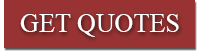
<style>
.page{position:relative;width:200px;height:52px;background:#993333}
.page>*{position:absolute;margin:0}
.t1{font:26.7px "TimesNewRomanPSMT";color:#ffffff;text-transform:uppercase}
</style>
<div class="page">
<p class="t1" style="left:20px;top:14px;width:159px;height:23px">Get Quotes</p>
</div>
